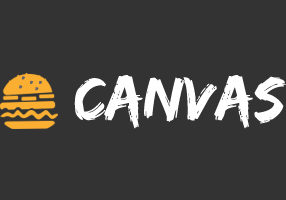
<style>
.page{position:relative;width:286px;height:200px;background:#333333}
.page>*{position:absolute;margin:0}
.t1{font:15.3px "EdoSZ";color:#676666}
.t2{font:64px "EdoSZ";color:#ffffff}
</style>
<div class="page">
<p class="t1" style="left:21px;top:76px;width:4px;height:4px">.</p>
<p class="t2" style="left:74px;top:75px;width:212px;height:54px">canvas</p>
<p class="t1" style="left:19px;top:85px;width:4px;height:4px">.</p>
<p class="t1" style="left:29px;top:80px;width:5px;height:4px">.</p>
<p class="t1" style="left:35px;top:87px;width:4px;height:4px">.</p>
<p class="t1" style="left:38px;top:80px;width:5px;height:4px">.</p>
</div>
